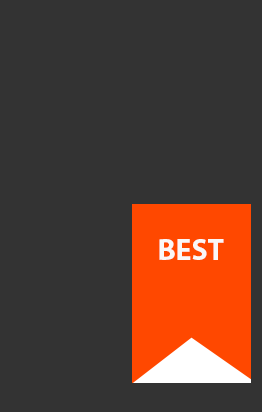
<style>
.page{position:relative;width:262px;height:412px;background:#333333}
.page>*{position:absolute;margin:0}
.t1{font:30px "MyriadPro-Bold";color:#faf7f7}
</style>
<div class="page">
<p class="t1" style="left:159px;top:239px;width:65px;height:21px">BEST</p>
</div>
